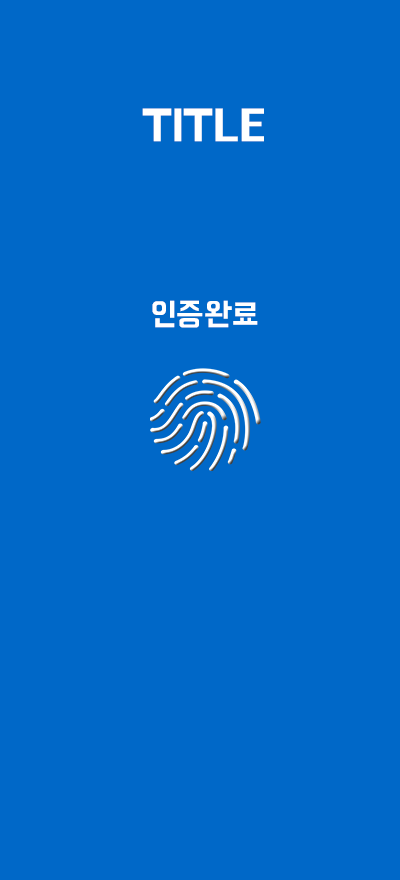
<style>
.page{position:relative;width:400px;height:880px;background:#0068c8}
.page>*{position:absolute;margin:0}
.t1{font:45px "BMHANNAPro";color:#ffffff}
.t2{font:32px "BMHANNAPro";color:#ffffff}
</style>
<div class="page">
<p class="t1" style="left:142px;top:108px;width:122px;height:34px">TITLE</p>
<p class="t2" style="left:152px;top:300px;width:106px;height:28px">인증완료</p>
</div>
